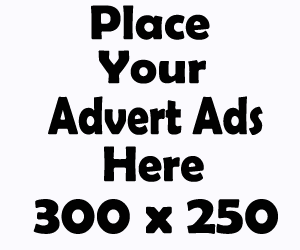
<style>
.page{position:relative;width:300px;height:250px;background:#fbfafe}
.page>*{position:absolute;margin:0}
.t1{font:48.7px "BerlinSansFBDemi-Bold";color:#010101}
.t2{font:47.3px "BerlinSansFBDemi-Bold";color:#010101;scale:1.09 1}
.t3{font:53.3px "BerlinSansFBDemi-Bold";color:#010101;scale:0.82 1}
.t4{font:50.2px "BerlinSansFBDemi-Bold";color:#010101;scale:0.96 1}
.t5{font:56.1px "BerlinSansFBDemi-Bold";color:#010101}
</style>
<div class="page">
<p class="t1" style="left:91px;top:5px;width:119px;height:35px">Place</p>
<p class="t2" style="left:98px;top:50px;width:108px;height:34px">Your</p>
<p class="t3" style="left:48px;top:96px;width:215px;height:39px">Advert Ads</p>
<p class="t4" style="left:104px;top:146px;width:100px;height:36px">Here</p>
<p class="t5" style="left:33px;top:199px;width:245px;height:35px">300 x 250</p>
</div>
